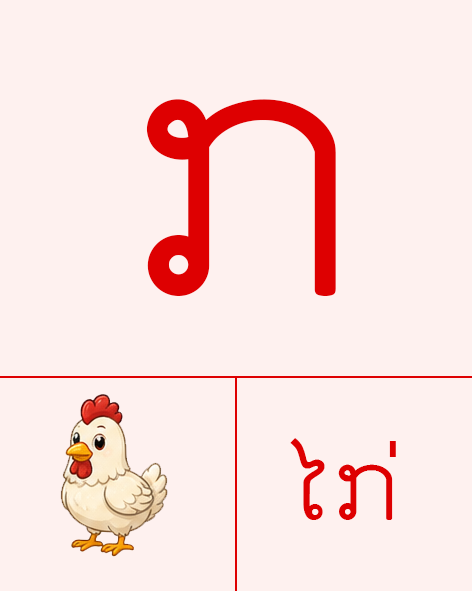
<style>
.page{position:relative;width:472px;height:591px;background:#fef1ef}
.page>*{position:absolute;margin:0}
.t1{font:354.2px "Phetsarath-OT(Modified_28_04_14)";letter-spacing:0.04em;color:#de0001}
.t2{font:100px "Phetsarath-OT(Modified_28_04_14)";letter-spacing:0.04em;color:#de0001}
</style>
<div class="page">
<p class="t1" style="left:146px;top:99px;width:190px;height:197px">ກ</p>
<p class="t2" style="left:290px;top:438px;width:106px;height:82px">ໄກ່</p>
</div>
